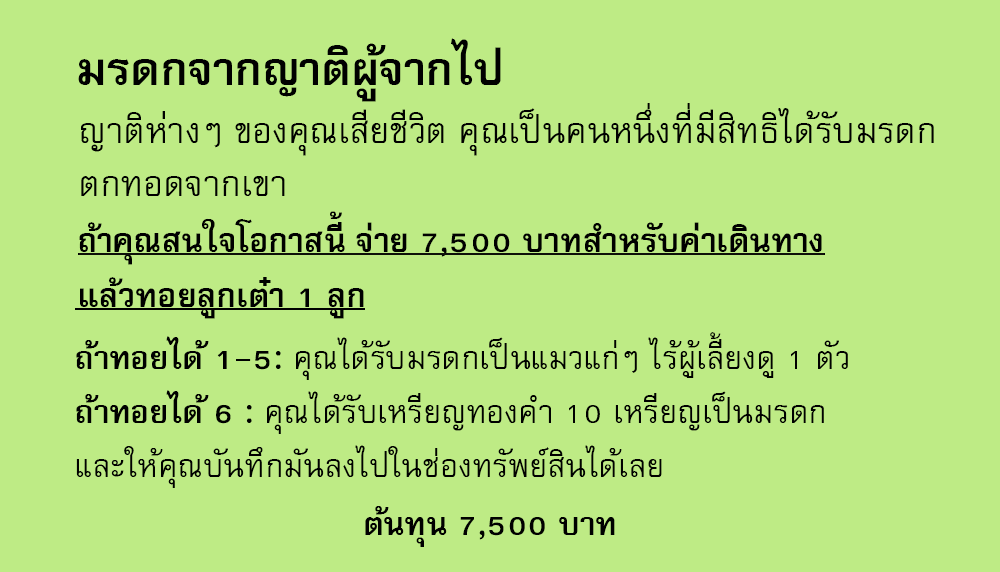
<style>
.page{position:relative;width:1000px;height:572px;background:#beeb85}
.page>*{position:absolute;margin:0}
.t1{font:64px "FreesiaUPCBold";color:#000000}
.t2{font:50px/53px "FreesiaUPC";color:#000000}
.t3{font:46px "FreesiaUPCBold";color:#000000}
.t4{font:45px "FreesiaUPC";color:#000000}
.t5{font:45px "FreesiaUPCBold";color:#000000}
</style>
<div class="page">
<p class="t1" style="left:78px;top:38px;width:423px;height:64px">มรดกจากญาติผู้จากไป</p>
<p class="t2" style="left:81px;top:103px;width:853px;height:93px">ญาติห่างๆ ของคุณเสียชีวิต คุณเป็นคนหนึ่งที่มีสิทธิได้รับมรดก<br>ตกทอดจากเขา</p>
<p class="t3" style="left:79px;top:211px;width:743px;height:108px">ถ้าคุณสนใจโอกาสนี้ จ่าย 7,500 บาทสำหรับค่าเดินทาง<br>แล้วทอยลูกเต๋า 1 ลูก</p>
<p class="t4" style="left:76px;top:332px;width:772px;height:156px"><span class="t5">ถ้าทอยได้ 1-5: </span>คุณได้รับมรดกเป็นแมวแก่ๆ ไร้ผู้เลี้ยงดู 1 ตัว<br><span class="t5">ถ้าทอยได้ 6 : </span>คุณได้รับเหรียญทองคำ 10 เหรียญเป็นมรดก<br>และให้คุณบันทึกมันลงไปในช่องทรัพย์สินได้เลย</p>
<p class="t5" style="left:365px;top:506px;width:250px;height:41px">ต้นทุน 7,500 บาท</p>
</div>
